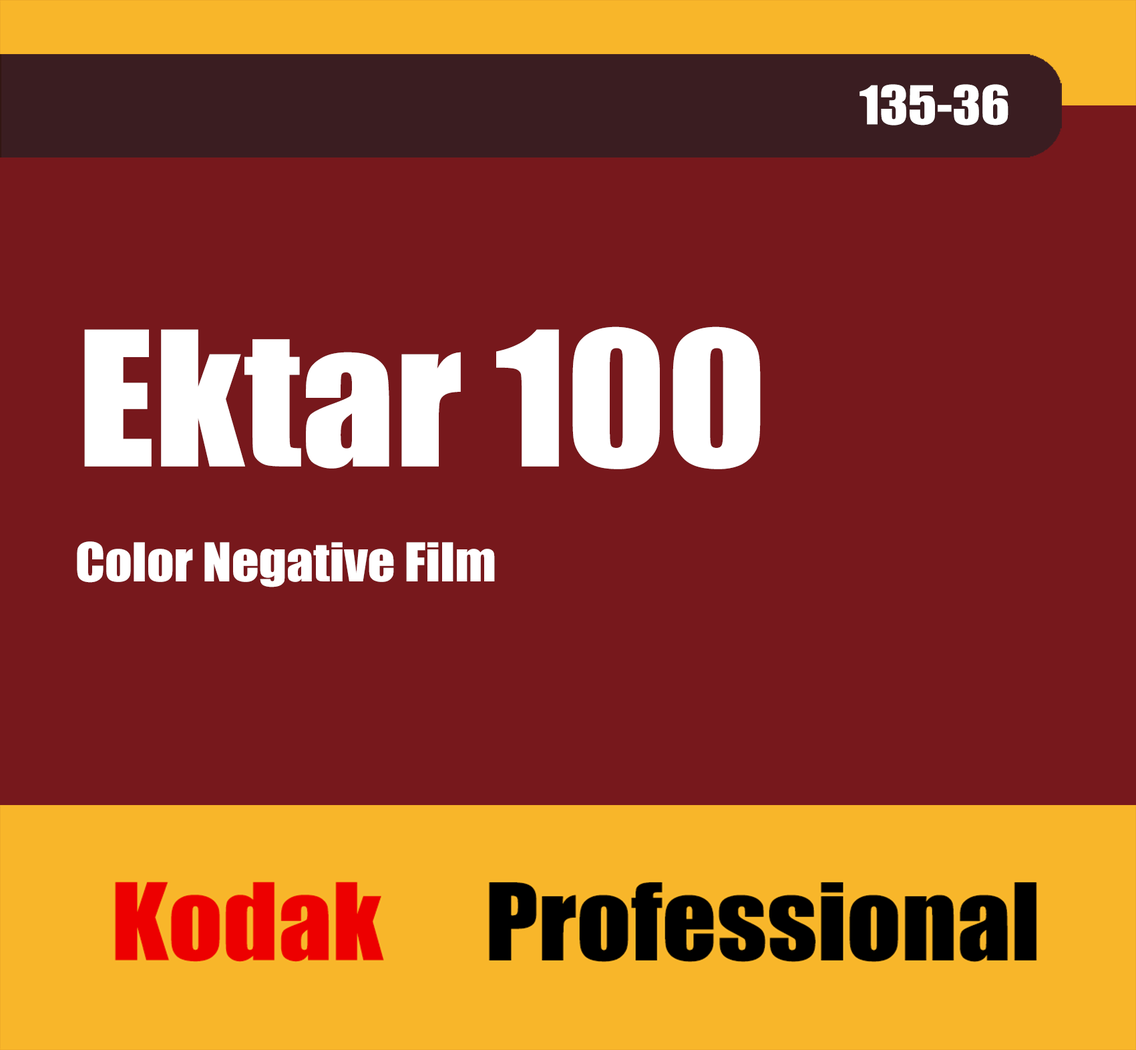
<style>
.page{position:relative;width:1136px;height:1050px;background:#77181c}
.page>*{position:absolute;margin:0}
.t1{font:49.4px "Impact";color:#ffffff;scale:1.08 1}
.t2{font:172.8px "Impact";color:#ffffff;scale:1.08 1}
</style>
<div class="page">
<p class="t1" style="left:859px;top:84px;width:149px;height:42px">135-36</p>
<p class="t2" style="left:84px;top:326px;width:676px;height:143px">Ektar 100</p>
<p class="t1" style="left:77px;top:541px;width:418px;height:46px">Color Negative Film</p>
</div>
